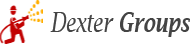
<style>
.page{position:relative;width:190px;height:44px;background:#ffffff}
.page>*{position:absolute;margin:0}
.t1{font:26.6px "LucidaBright-Italic";color:#444444;scale:0.74 1}
.t2{font:26.6px "LucidaBright-DemiItalic";color:#444444;scale:0.74 1}
</style>
<div class="page">
<p class="t1" style="left:50px;top:12px;width:140px;height:25px">Dexter <span class="t2">Groups</span></p>
</div>
